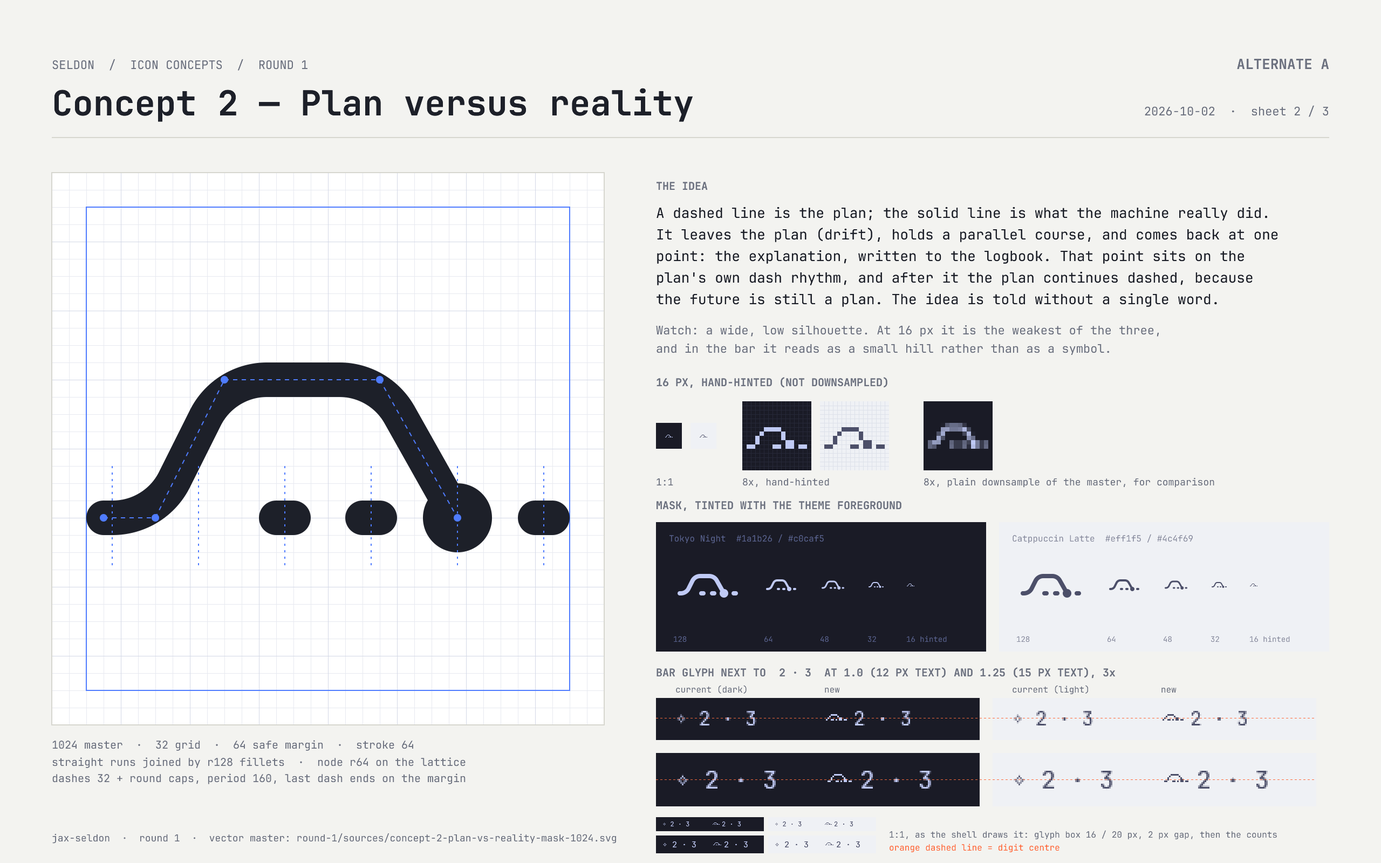
<style>
.page{position:relative;width:1381px;height:863px;background:#f3f3f0}
.page>*{position:absolute;margin:0}
.t1{font:11.9px "JetBrainsMonoNF-Regular";color:#6d7280}
.t2{font:14px "JetBrainsMonoNF-Bold";color:#6d7280}
.t3{font:34.5px "JetBrainsMonoNF-Bold";color:#1d2029}
.t4{font:10.8px "JetBrainsMonoNF-Bold";color:#6d7280}
.t5{font:14px "JetBrainsMonoNF-Regular";color:#1d2029}
.t6{font:9.7px "JetBrainsMonoNF-Regular";color:#6d7280}
.t7{font:8.6px "JetBrainsMonoNF-Regular";color:#565f89}
.t8{font:8.6px "JetBrainsMonoNF-Regular";color:#8c8fa1}
.t9{font:7.6px "JetBrainsMonoNF-Regular";color:#565f89}
.t10{font:7.6px "JetBrainsMonoNF-Regular";color:#8c8fa1}
.t11{font:8.6px "JetBrainsMonoNF-Regular";color:#6d7280}
.t12{font:10.8px "JetBrainsMonoNF-Regular";color:#6d7280}
.t13{font:8.6px "JetBrainsMonoNF-Regular";color:#ff6a3d}
</style>
<div class="page">
<p class="t1" style="left:52px;top:59px;width:256px;height:12px">SELDON  /  ICON CONCEPTS  /  ROUND 1</p>
<p class="t2" style="left:1237px;top:59px;width:92px;height:10px">ALTERNATE A</p>
<p class="t3" style="left:54px;top:88px;width:639px;height:34px">Concept 2 — Plan versus reality</p>
<p class="t1" style="left:1145px;top:105px;width:183px;height:12px">2026-10-02  ·  sheet 2 / 3</p>
<p class="t4" style="left:657px;top:182px;width:51px;height:8px">THE IDEA</p>
<p class="t5" style="left:657px;top:207px;width:610px;height:14px">A dashed line is the plan; the solid line is what the machine really did.</p>
<p class="t5" style="left:657px;top:228px;width:621px;height:14px">It leaves the plan (drift), holds a parallel course, and comes back at one</p>
<p class="t5" style="left:657px;top:250px;width:587px;height:14px">point: the explanation, written to the logbook. That point sits on the</p>
<p class="t5" style="left:657px;top:271px;width:596px;height:14px">plan's own dash rhythm, and after it the plan continues dashed, because</p>
<p class="t5" style="left:657px;top:293px;width:560px;height:14px">the future is still a plan. The idea is told without a single word.</p>
<p class="t1" style="left:656px;top:325px;width:503px;height:12px">Watch: a wide, low silhouette. At 16 px it is the weakest of the three,</p>
<p class="t1" style="left:657px;top:344px;width:452px;height:11px">and in the bar it reads as a small hill rather than as a symbol.</p>
<p class="t4" style="left:657px;top:377px;width:231px;height:11px">16 PX, HAND-HINTED (NOT DOWNSAMPLED)</p>
<p class="t6" style="left:657px;top:478px;width:16px;height:8px">1:1</p>
<p class="t6" style="left:743px;top:478px;width:86px;height:9px">8x, hand-hinted</p>
<p class="t6" style="left:924px;top:478px;width:291px;height:10px">8x, plain downsample of the master, for comparison</p>
<p class="t4" style="left:657px;top:501px;width:245px;height:10px">MASK, TINTED WITH THE THEME FOREGROUND</p>
<p class="t7" style="left:670px;top:534px;width:154px;height:9px">Tokyo Night  #1a1b26 / #c0caf5</p>
<p class="t8" style="left:1013px;top:534px;width:180px;height:9px">Catppuccin Latte  #eff1f5 / #4c4f69</p>
<p class="t9" style="left:674px;top:636px;width:13px;height:7px">128</p>
<p class="t9" style="left:765px;top:636px;width:8px;height:7px">64</p>
<p class="t9" style="left:821px;top:636px;width:8px;height:7px">48</p>
<p class="t9" style="left:868px;top:636px;width:8px;height:7px">32</p>
<p class="t9" style="left:907px;top:636px;width:40px;height:7px">16 hinted</p>
<p class="t10" style="left:1017px;top:636px;width:13px;height:7px">128</p>
<p class="t10" style="left:1108px;top:636px;width:8px;height:7px">64</p>
<p class="t10" style="left:1164px;top:636px;width:8px;height:7px">48</p>
<p class="t10" style="left:1211px;top:636px;width:8px;height:7px">32</p>
<p class="t10" style="left:1250px;top:636px;width:40px;height:7px">16 hinted</p>
<p class="t4" style="left:657px;top:667px;width:458px;height:12px">BAR GLYPH NEXT TO  2 · 3  AT 1.0 (12 PX TEXT) AND 1.25 (15 PX TEXT), 3x</p>
<p class="t11" style="left:676px;top:685px;width:71px;height:9px">current (dark)</p>
<p class="t11" style="left:825px;top:688px;width:15px;height:5px">new</p>
<p class="t11" style="left:1013px;top:685px;width:75px;height:9px">current (light)</p>
<p class="t11" style="left:1162px;top:688px;width:15px;height:5px">new</p>
<p class="t12" style="left:52px;top:740px;width:361px;height:11px">1024 master  ·  32 grid  ·  64 safe margin  ·  stroke 64</p>
<p class="t12" style="left:52px;top:758px;width:414px;height:10px">straight runs joined by r128 fillets  ·  node r64 on the lattice</p>
<p class="t12" style="left:52px;top:774px;width:414px;height:11px">dashes 32 + round caps, period 160, last dash ends on the margin</p>
<p class="t6" style="left:52px;top:834px;width:564px;height:10px">jax-seldon  ·  round 1  ·  vector master: round-1/sources/concept-2-plan-vs-reality-mask-1024.svg</p>
<p class="t11" style="left:890px;top:830px;width:387px;height:10px">1:1, as the shell draws it: glyph box 16 / 20 px, 2 px gap, then the counts</p>
<p class="t13" style="left:890px;top:844px;width:170px;height:8px">orange dashed line = digit centre</p>
</div>
